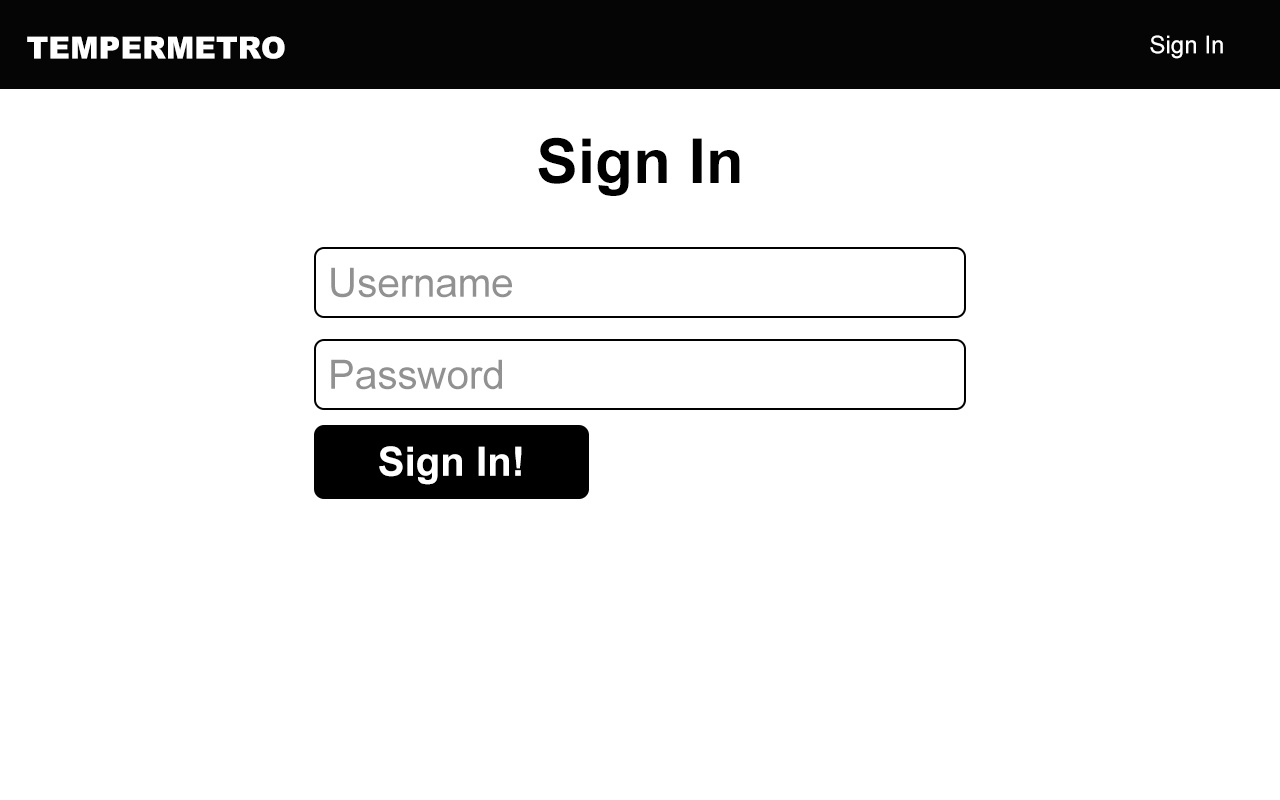
<style>
.page{position:relative;width:1280px;height:800px;background:#ffffff}
.page>*{position:absolute;margin:0}
.t1{font:30.2px "Arial-Black";color:#ffffff}
.t2{font:24.2px "ArialMT";color:#ffffff}
.t3{font:62.2px "Arial-BoldMT";color:#000000}
.t4{font:40.2px "ArialMT";color:#919191}
.t5{font:40.2px "Arial-BoldMT";color:#ffffff}
</style>
<div class="page">
<p class="t1" style="left:27px;top:36px;width:258px;height:23px">TEMPERMETRO</p>
<p class="t2" style="left:1150px;top:35px;width:73px;height:24px">Sign In</p>
<p class="t3" style="left:538px;top:137px;width:202px;height:59px">Sign In</p>
<p class="t4" style="left:331px;top:267px;width:181px;height:31px">Username</p>
<p class="t4" style="left:331px;top:359px;width:171px;height:31px">Password</p>
<p class="t5" style="left:379px;top:446px;width:143px;height:39px">Sign In!</p>
</div>
